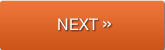
<style>
.page{position:relative;width:165px;height:50px}
.page>*{position:absolute;margin:0}
.t1{font:16px "HelveticaNeue";color:#ffffff}
.t2{font:21px "HelveticaNeue";color:#ffffff}
</style>
<div class="page">
<p class="t1" style="left:58px;top:18px;width:53px;height:12px">NEXT <span class="t2">»</span></p>
</div>
